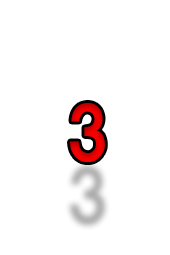
<style>
.page{position:relative;width:170px;height:255px;background:#ffffff}
.page>*{position:absolute;margin:0}
.t1{font:72px "HGSSoeiKakugothicUB";color:#e80000}
</style>
<div class="page">
<p class="t1" style="left:70px;top:103px;width:35px;height:59px">3</p>
</div>
